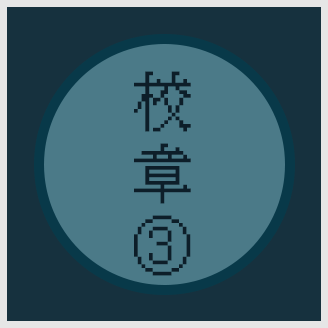
<style>
.page{position:relative;width:328px;height:328px;background:#16313e}
.page>*{position:absolute;margin:0}
.t1{font:60px "KH-Dot-kagurazaka-16";letter-spacing:0.12em;color:#0a192d}
</style>
<div class="page">
<p class="t1" style="left:134px;top:71px;width:57px;height:205px;text-align:center">校章<br>③</p>
</div>
